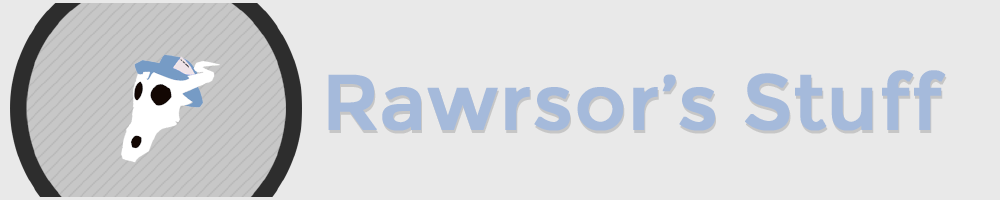
<style>
.page{position:relative;width:1000px;height:200px;background:#e9e9e9}
.page>*{position:absolute;margin:0}
.t1{font:77.8px "Montserrat-Regular";color:#a5badb;font-weight:bold}
</style>
<div class="page">
<p class="t1" style="left:328px;top:70px;width:618px;height:61px">Rawrsor’s Stuff</p>
</div>
